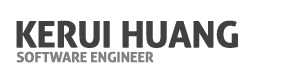
<style>
.page{position:relative;width:300px;height:80px;background:#ffffff}
.page>*{position:absolute;margin:0}
.t1{font:36px "Aller-Bold";letter-spacing:-0.025em;color:#414141;font-weight:bold}
.t2{font:14px "Aller-Bold";letter-spacing:-0.025em;color:#818181;font-weight:bold}
</style>
<div class="page">
<p class="t1" style="left:16px;top:20px;width:222px;height:28px">KERUI HUANG</p>
<p class="t2" style="left:16px;top:51px;width:138px;height:12px">SOFTWARE ENGINEER</p>
</div>
